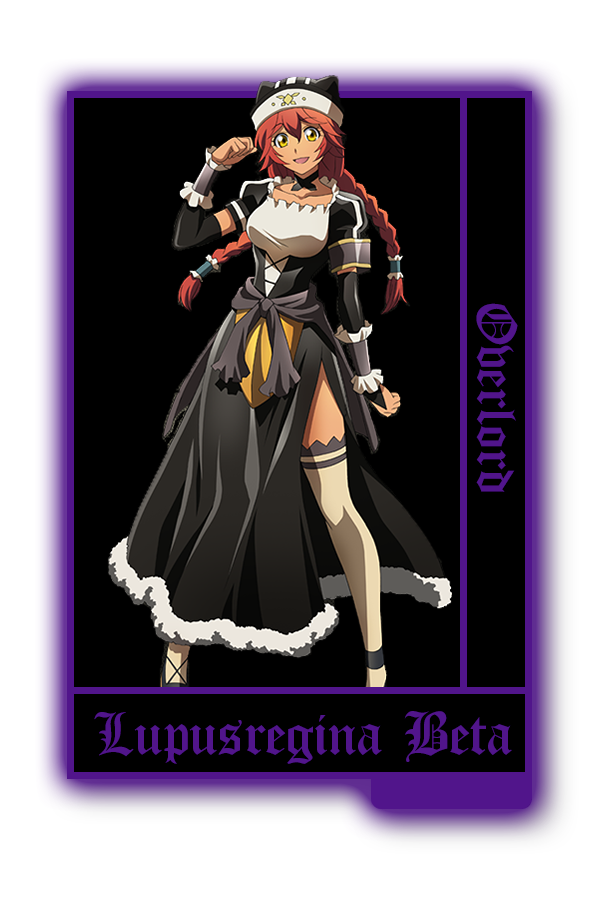
<style>
.page{position:relative;width:600px;height:900px;background:#000000}
.page>*{position:absolute;margin:0}
.t1{font:61.5px "OldLondon";color:#51158b}
.t2{font:65.2px "OldLondon";color:#51158b}
</style>
<div class="page">
<p class="t1" style="left:476px;top:303px;width:42px;height:189px;rotate:90deg">Overlord</p>
<p class="t2" style="left:94px;top:711px;width:418px;height:53px">Lupusregina Beta</p>
</div>
